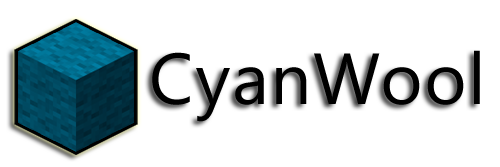
<style>
.page{position:relative;width:500px;height:167px;background:#ffffff}
.page>*{position:absolute;margin:0}
.t1{font:72px "SegoeUISymbol";letter-spacing:0.025em;color:#000000}
</style>
<div class="page">
<p class="t1" style="left:152px;top:50px;width:328px;height:72px">CyanWool</p>
</div>
